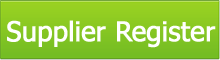
<style>
.page{position:relative;width:220px;height:60px}
.page>*{position:absolute;margin:0}
.t1{font:27px "Tahoma";letter-spacing:-0.01em;color:#ffffff;font-weight:bold}
</style>
<div class="page">
<p class="t1" style="left:7px;top:20px;width:209px;height:28px">Supplier Register</p>
</div>
